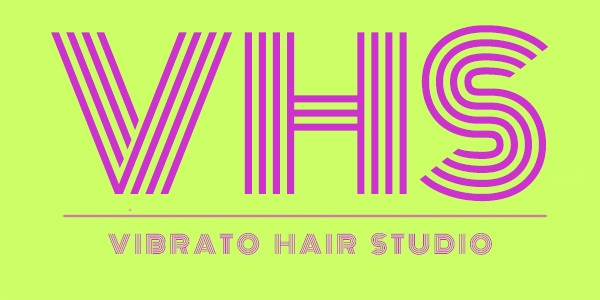
<style>
.page{position:relative;width:600px;height:300px;background:#ccff66}
.page>*{position:absolute;margin:0}
.t1{font:25px "Monoton-Regular";color:#cc33cc}
.t2{font:200px "Monoton-Regular";color:#cc33cc}
</style>
<div class="page">
<p class="t1" style="left:51px;top:25px;width:498px;height:230px;text-align:center"><span class="t2">VHS</span><br><br>V I B R A T O     H A I R     S T U D I O</p>
</div>
